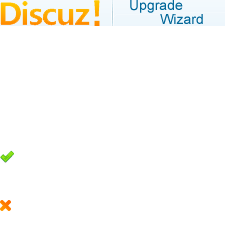
<style>
.page{position:relative;width:225px;height:250px;background:#ffffff}
.page>*{position:absolute;margin:0}
.t1{font:14px/14px "ArialMT";color:#006699}
</style>
<div class="page">
<p class="t1" style="left:129px;top:0px;width:75px;height:29px">Upgrade<br>        Wizard</p>
</div>
